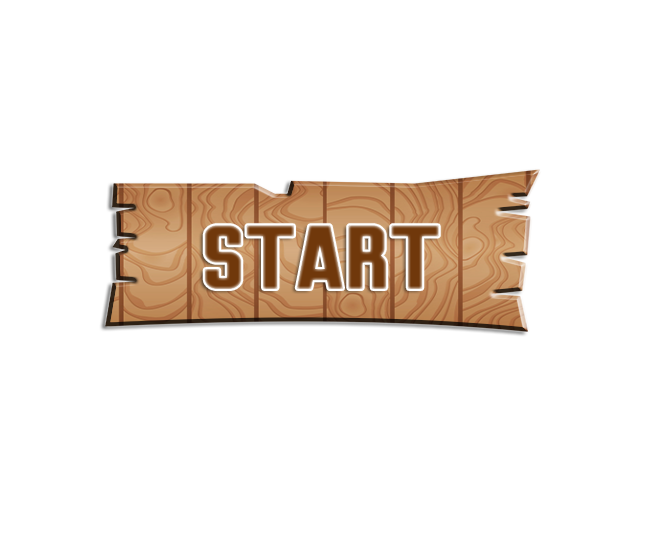
<style>
.page{position:relative;width:650px;height:536px;background:#ffffff}
.page>*{position:absolute;margin:0}
.t1{font:70px "BrewmasterGothicRound";color:#70380b;scale:1.26 1}
</style>
<div class="page">
<p class="t1" style="left:204px;top:225px;width:235px;height:64px">start</p>
</div>
